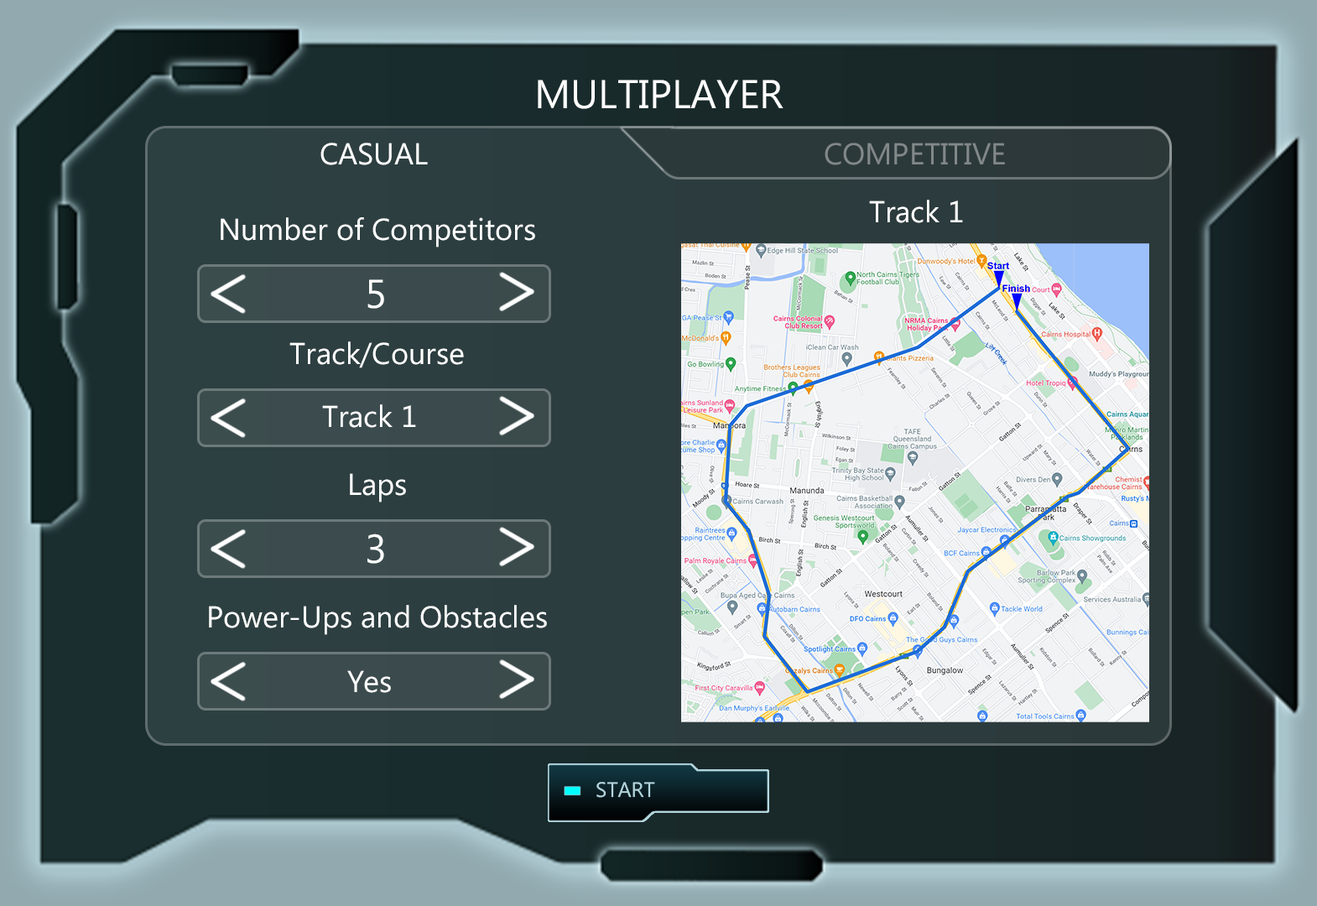
<style>
.page{position:relative;width:1317px;height:906px}
.page>*{position:absolute;margin:0}
.t1{font:40.3px "MicrosoftPhagsPa";color:#ffffff}
.t2{font:30.2px "MicrosoftPhagsPa";color:#ffffff}
.t3{font:30.2px "MicrosoftPhagsPa";color:#828889}
</style>
<div class="page">
<p class="t1" style="left:538px;top:80px;width:245px;height:29px">MULTIPLAYER</p>
<p class="t2" style="left:320px;top:143px;width:108px;height:22px">CASUAL</p>
<p class="t3" style="left:824px;top:143px;width:181px;height:22px">COMPETITIVE</p>
<p class="t2" style="left:869px;top:200px;width:94px;height:23px">Track 1</p>
<p class="t2" style="left:221px;top:217px;width:314px;height:30px">Number of Competitors</p>
<p class="t1" style="left:367px;top:279px;width:17px;height:30px">5</p>
<p class="t2" style="left:289px;top:341px;width:175px;height:27px">Track/Course</p>
<p class="t2" style="left:322px;top:404px;width:94px;height:24px">Track 1</p>
<p class="t2" style="left:350px;top:473px;width:56px;height:29px">Laps</p>
<p class="t1" style="left:367px;top:533px;width:17px;height:31px">3</p>
<p class="t2" style="left:209px;top:605px;width:338px;height:30px">Power-Ups and Obstacles</p>
<p class="t2" style="left:347px;top:670px;width:44px;height:23px">Yes</p>
</div>
